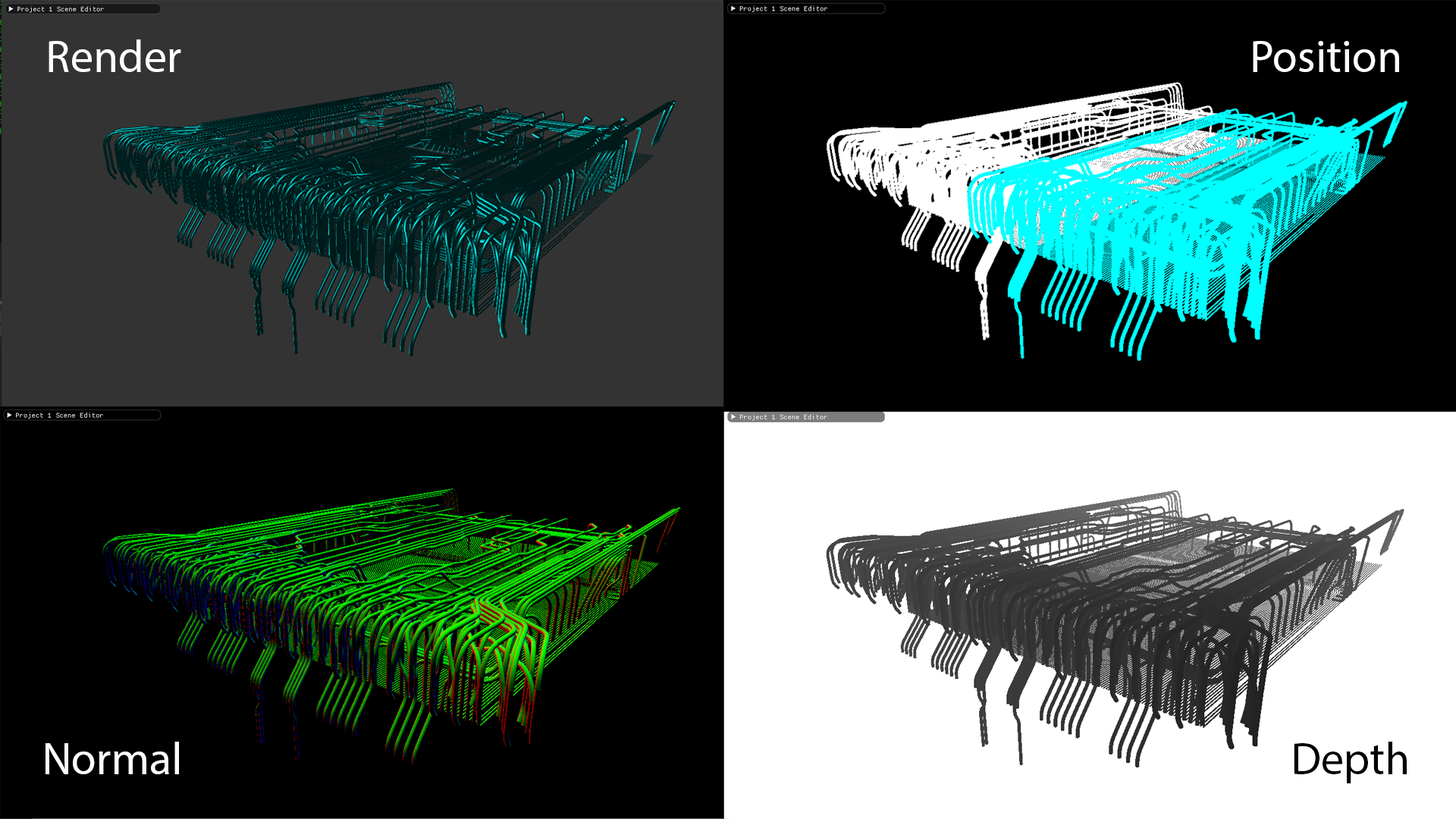
<style>
.page{position:relative;width:1456px;height:819px;background:#000000}
.page>*{position:absolute;margin:0}
.t1{font:45.5px "MyriadPro-Regular";color:#ffffff}
.t2{font:45.5px "MyriadPro-Regular";color:#000000}
</style>
<div class="page">
<p class="t1" style="left:49px;top:39px;width:132px;height:33px">Render</p>
<p class="t1" style="left:1253px;top:41px;width:146px;height:31px">Position</p>
<p class="t1" style="left:45px;top:742px;width:134px;height:32px">Normal</p>
<p class="t2" style="left:1294px;top:742px;width:113px;height:41px">Depth</p>
</div>
